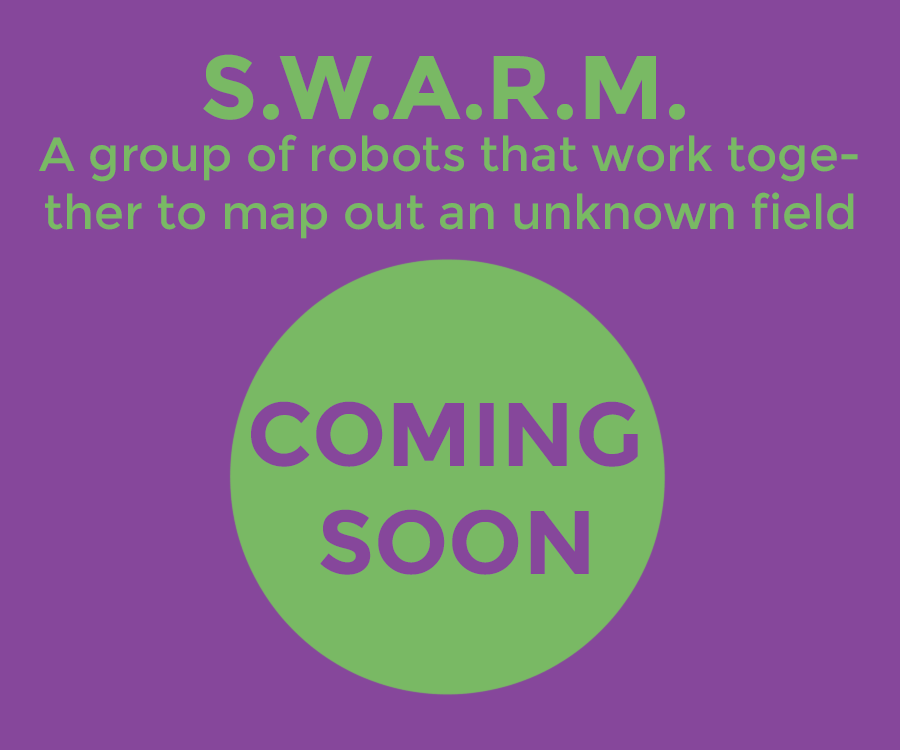
<style>
.page{position:relative;width:900px;height:750px;background:#86479b}
.page>*{position:absolute;margin:0}
.t1{font:90px "Montserrat-Bold";color:#79b964}
.t2{font:48px "Montserrat-Regular";color:#79b964}
.t3{font:90px "Montserrat-Bold";color:#86479b}
</style>
<div class="page">
<p class="t1" style="left:203px;top:54px;width:482px;height:66px">S.W.A.R.M.</p>
<p class="t2" style="left:39px;top:134px;width:819px;height:105px;text-align:center">A group of robots that work toge-<br>ther to map out an unknown field</p>
<p class="t3" style="left:251px;top:401px;width:387px;height:174px;text-align:center">COMING <br>SOON</p>
</div>
